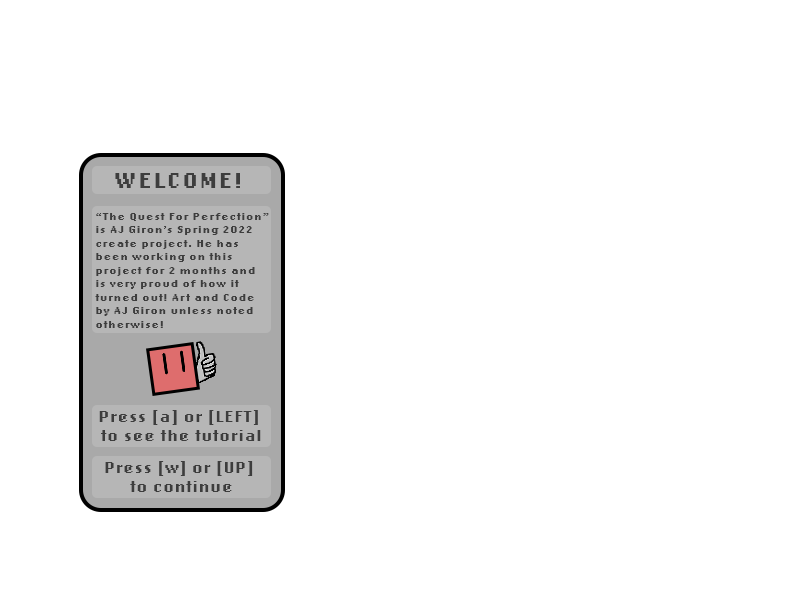
<style>
.page{position:relative;width:800px;height:600px;background:#ffffff}
.page>*{position:absolute;margin:0}
.t1{font:23.4px "LoRes12OT-Bold";letter-spacing:0.07em;color:#3d3d3d}
.t2{font:11.3px "LoRes12OT-Bold";letter-spacing:0.07em;color:#3d3d3d}
.t3{font:15.6px "LoRes12OT-Bold";letter-spacing:0.07em;color:#3d3d3d}
</style>
<div class="page">
<p class="t1" style="left:115px;top:173px;width:125px;height:15px">WELCOME!</p>
<p class="t2" style="left:95px;top:213px;width:174px;height:115px">“The Quest For Perfection”<br>is AJ Giron’s Spring 2022 <br>create project. He has <br>been working on this <br>project for 2 months and<br>is very proud of how it<br>turned out! Art and Code <br>by AJ Giron unless noted<br>otherwise!</p>
<p class="t3" style="left:99px;top:410px;width:162px;height:31px;text-align:center">Press [a] or [LEFT] <br>to see the tutorial</p>
<p class="t3" style="left:105px;top:461px;width:148px;height:31px;text-align:center">Press [w] or [UP] <br>to continue</p>
</div>
